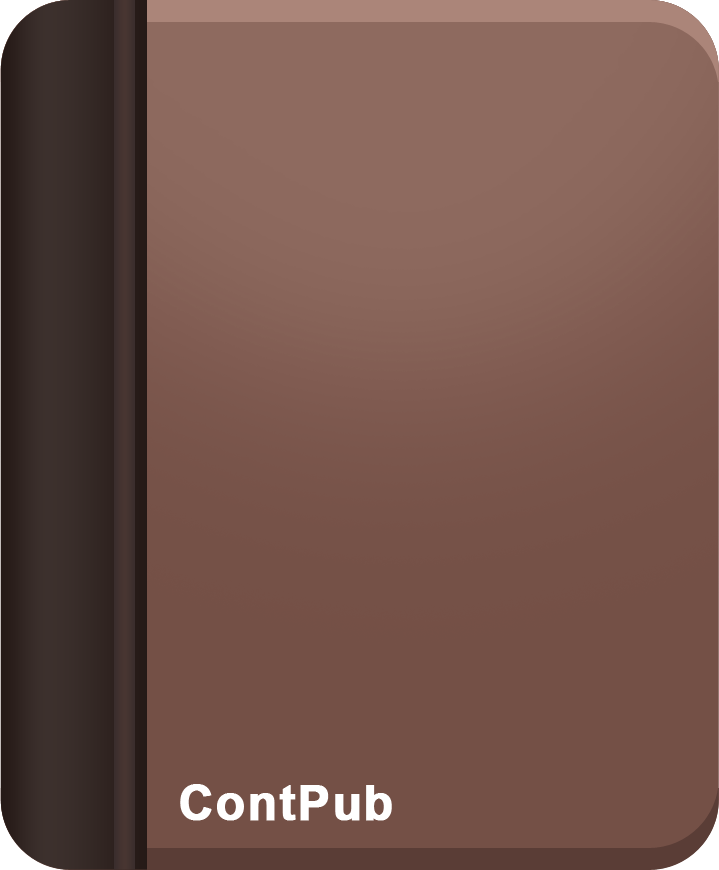
<style>
.page{position:relative;width:719px;height:870px;background:#745046}
.page>*{position:absolute;margin:0}
.t1{font:48px "Arial-BoldMT";letter-spacing:0.025em;color:#ffffff;font-weight:bold}
</style>
<div class="page">
<p class="t1" style="left:180px;top:784px;width:212px;height:37px">ContPub</p>
</div>
